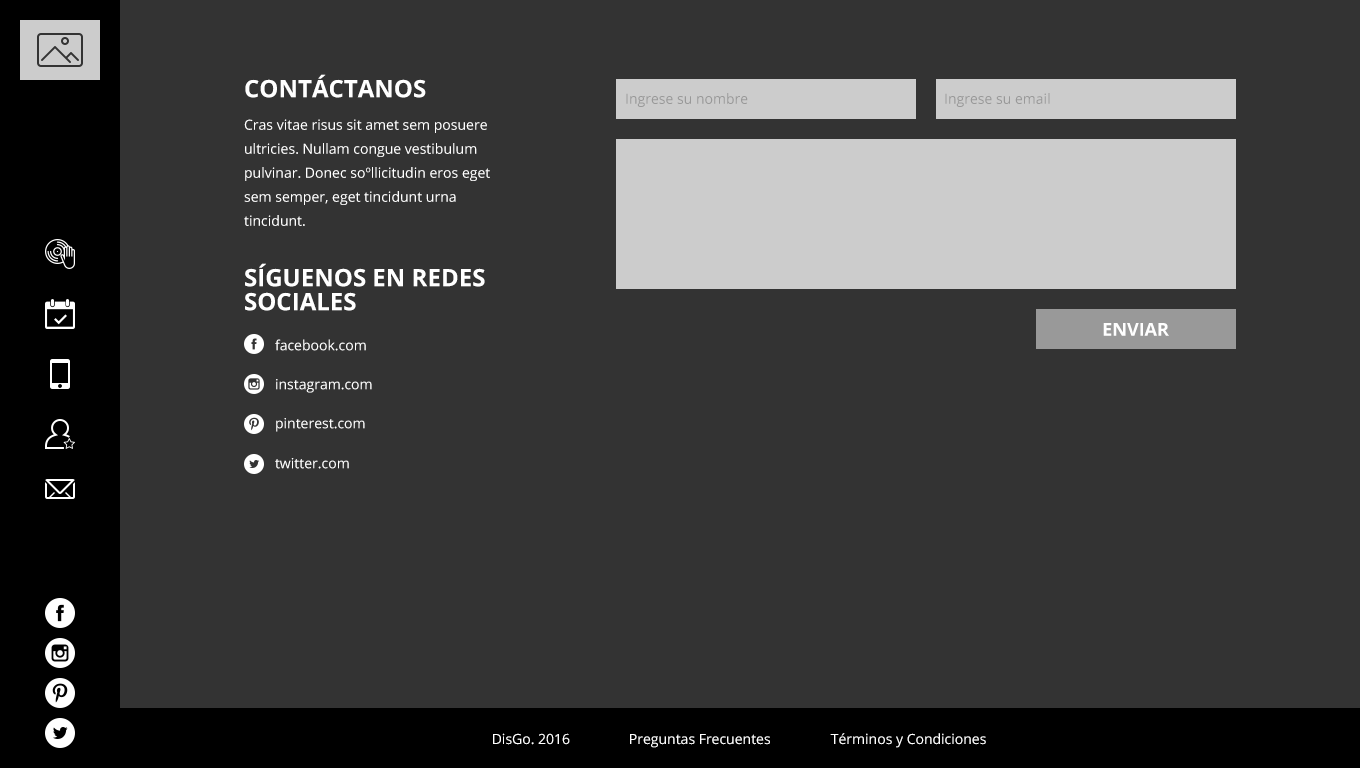
<style>
.page{position:relative;width:1360px;height:768px;background:#333333}
.page>*{position:absolute;margin:0}
.t1{font:24px "OpenSans-Bold";color:#ffffff}
.t2{font:14px "OpenSans";color:#999999}
.t3{font:14px/24px "OpenSans";color:#ffffff}
.t4{font:24px/24px "OpenSans-Bold";color:#ffffff;text-transform:uppercase}
.t5{font:18px "OpenSans-Bold";color:#ffffff;text-transform:uppercase}
.t6{font:14px "OpenSans";color:#ffffff}
</style>
<div class="page">
<p class="t1" style="left:245px;top:74px;width:181px;height:24px">CONTÁCTANOS</p>
<p class="t2" style="left:626px;top:93px;width:122px;height:14px">Ingrese su nombre</p>
<p class="t2" style="left:945px;top:93px;width:105px;height:14px">Ingrese su email</p>
<p class="t3" style="left:244px;top:119px;width:246px;height:107px">Cras vitae risus sit amet sem posuere ultricies. Nullam congue vestibulum pulvinar. Donec soºllicitudin eros eget sem semper, eget tincidunt urna tincidunt.</p>
<p class="t4" style="left:245px;top:263px;width:240px;height:48px">Síguenos en Redes Sociales</p>
<p class="t5" style="left:1103px;top:323px;width:66px;height:13px">Enviar</p>
<p class="t6" style="left:275px;top:339px;width:91px;height:12px">facebook.com</p>
<p class="t6" style="left:276px;top:379px;width:96px;height:14px">instagram.com</p>
<p class="t6" style="left:276px;top:418px;width:89px;height:14px">pinterest.com</p>
<p class="t6" style="left:275px;top:458px;width:74px;height:11px">twitter.com</p>
<p class="t6" style="left:493px;top:733px;width:77px;height:12px">DisGo. 2016</p>
<p class="t6" style="left:630px;top:734px;width:140px;height:14px">Preguntas Frecuentes</p>
<p class="t6" style="left:830px;top:733px;width:156px;height:15px">Términos y Condiciones</p>
</div>
